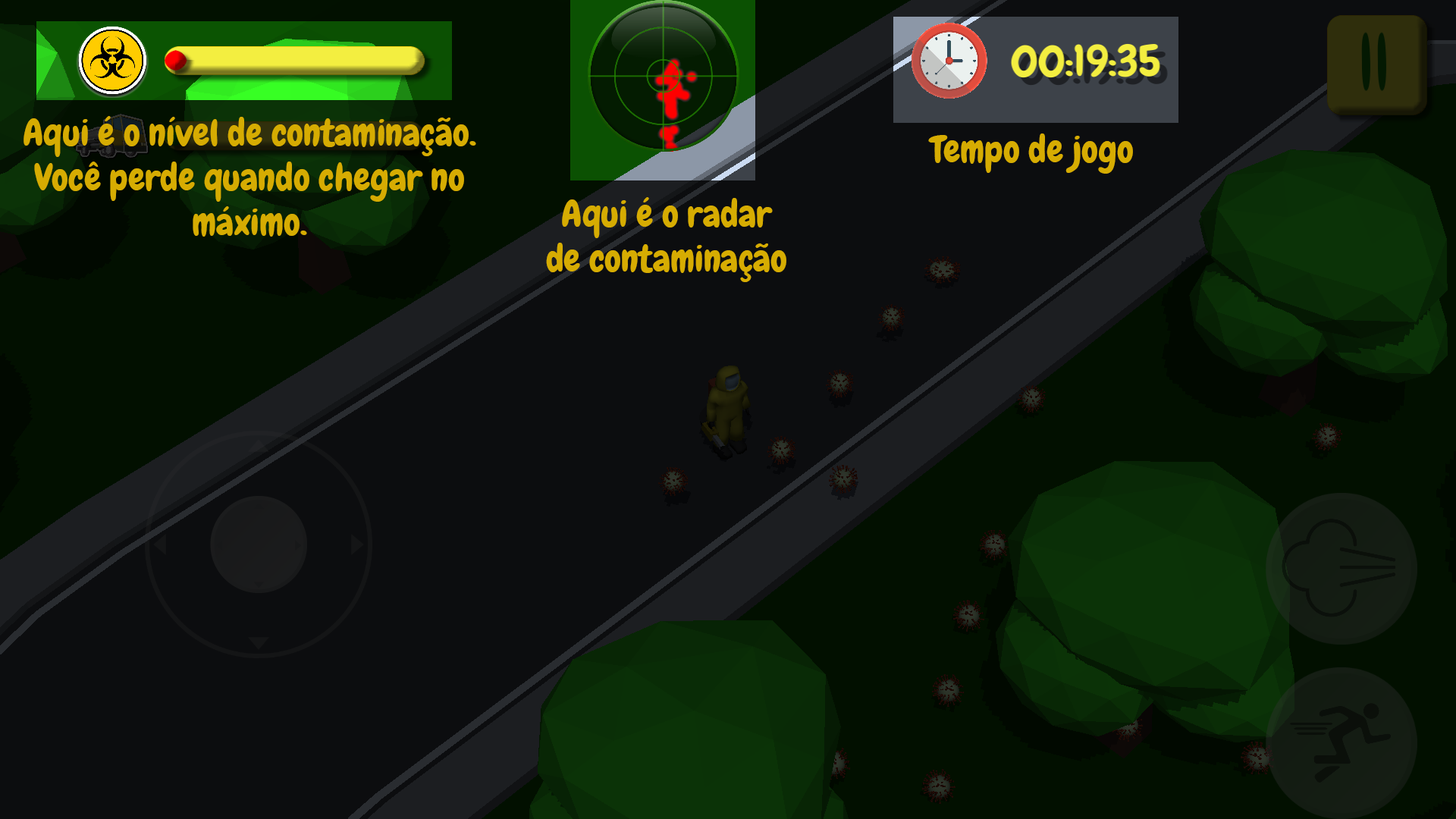
<style>
.page{position:relative;width:1456px;height:819px;background:#0c0d0f}
.page>*{position:absolute;margin:0}
.t1{font:37.1px "Chewy-Regular";color:#d6ac02}
</style>
<div class="page">
<p class="t1" style="left:24px;top:116px;width:452px;height:121px;text-align:center">Aqui é o nível de contaminação.<br>Você perde quando chegar no<br>máximo.</p>
<p class="t1" style="left:928px;top:133px;width:205px;height:41px">Tempo de jogo</p>
<p class="t1" style="left:546px;top:197px;width:240px;height:85px;text-align:center">Aqui é o radar<br>de contaminação</p>
</div>
